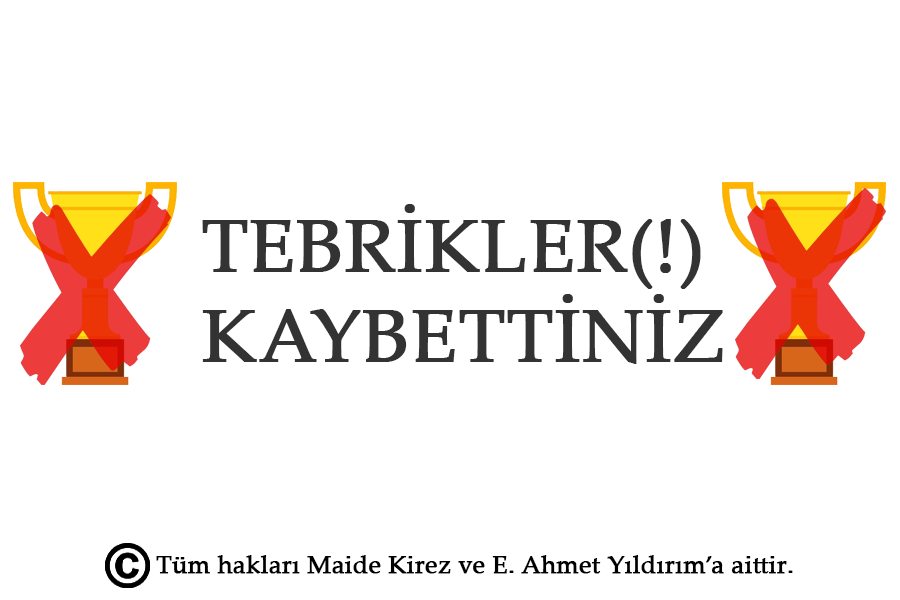
<style>
.page{position:relative;width:900px;height:600px;background:#ffffff}
.page>*{position:absolute;margin:0}
.t1{font:75px "PalatinoLinotype-Roman";color:#333333;font-weight:bold}
.t2{font:25px "PalatinoLinotype-Roman";color:#000000;font-weight:bold}
</style>
<div class="page">
<p class="t1" style="left:202px;top:204px;width:521px;height:160px;text-align:center">TEBRİKLER(!) <br>KAYBETTİNİZ</p>
<p class="t2" style="left:156px;top:555px;width:637px;height:19px">Tüm hakları Maide Kirez ve E. Ahmet Yıldırım’a aittir.</p>
</div>
